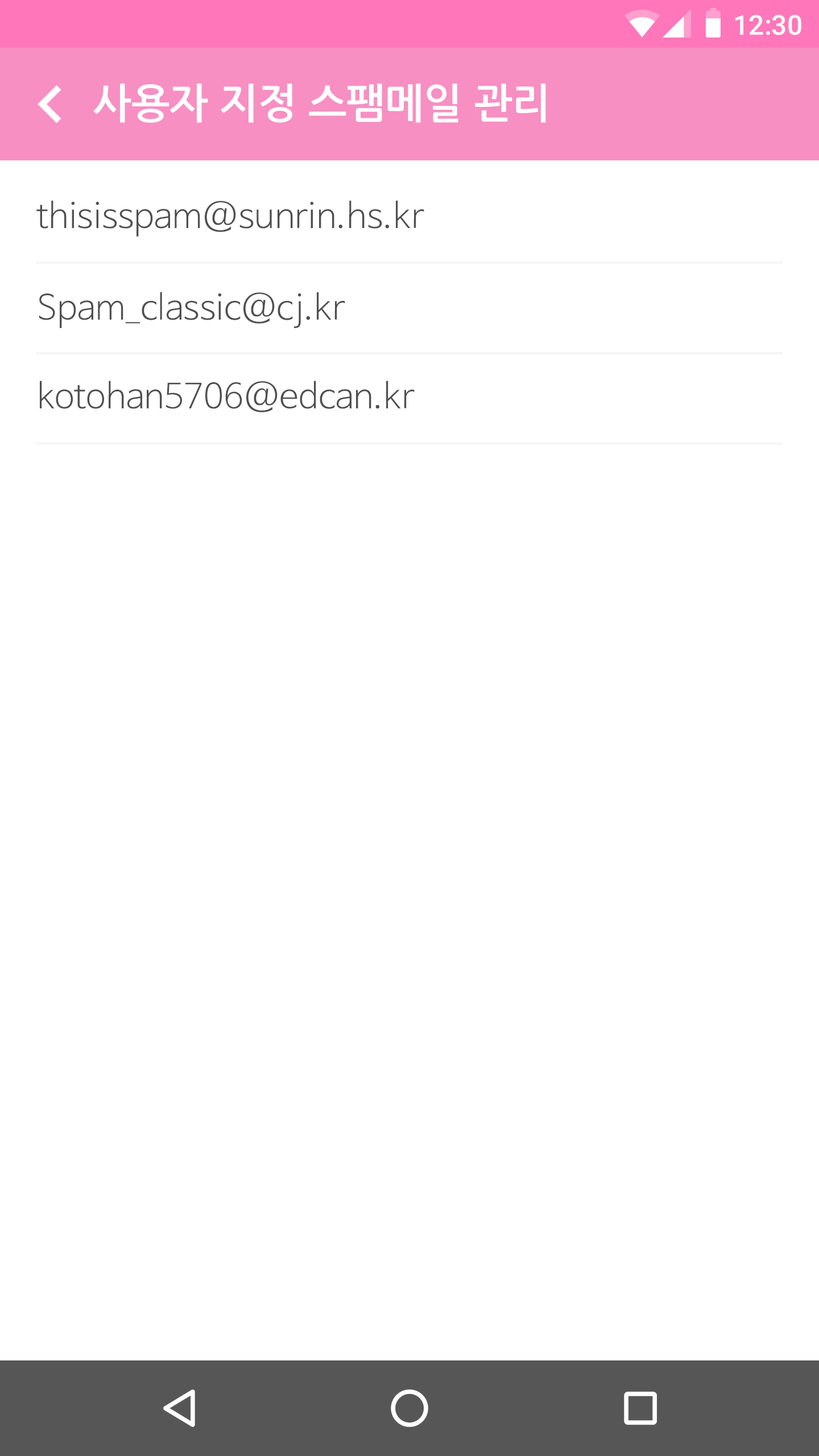
<style>
.page{position:relative;width:819px;height:1456px;background:#ffffff}
.page>*{position:absolute;margin:0}
.t1{font:27.3px "Roboto-Medium";color:#ffffff}
.t2{font:40.9px "NanumGothicBold";color:#ffffff}
.t3{font:34.2px "NanumBarunGothicLight";color:#4f4f4f}
</style>
<div class="page">
<p class="t1" style="left:735px;top:15px;width:66px;height:20px">12:30</p>
<p class="t2" style="left:93px;top:84px;width:453px;height:39px">사용자 지정 스팸메일 관리</p>
<p class="t3" style="left:36px;top:200px;width:388px;height:37px">thisisspam@sunrin.hs.kr</p>
<p class="t3" style="left:39px;top:292px;width:306px;height:36px">Spam_classic@cj.kr</p>
<p class="t3" style="left:40px;top:380px;width:375px;height:32px">kotohan5706@edcan.kr</p>
</div>
